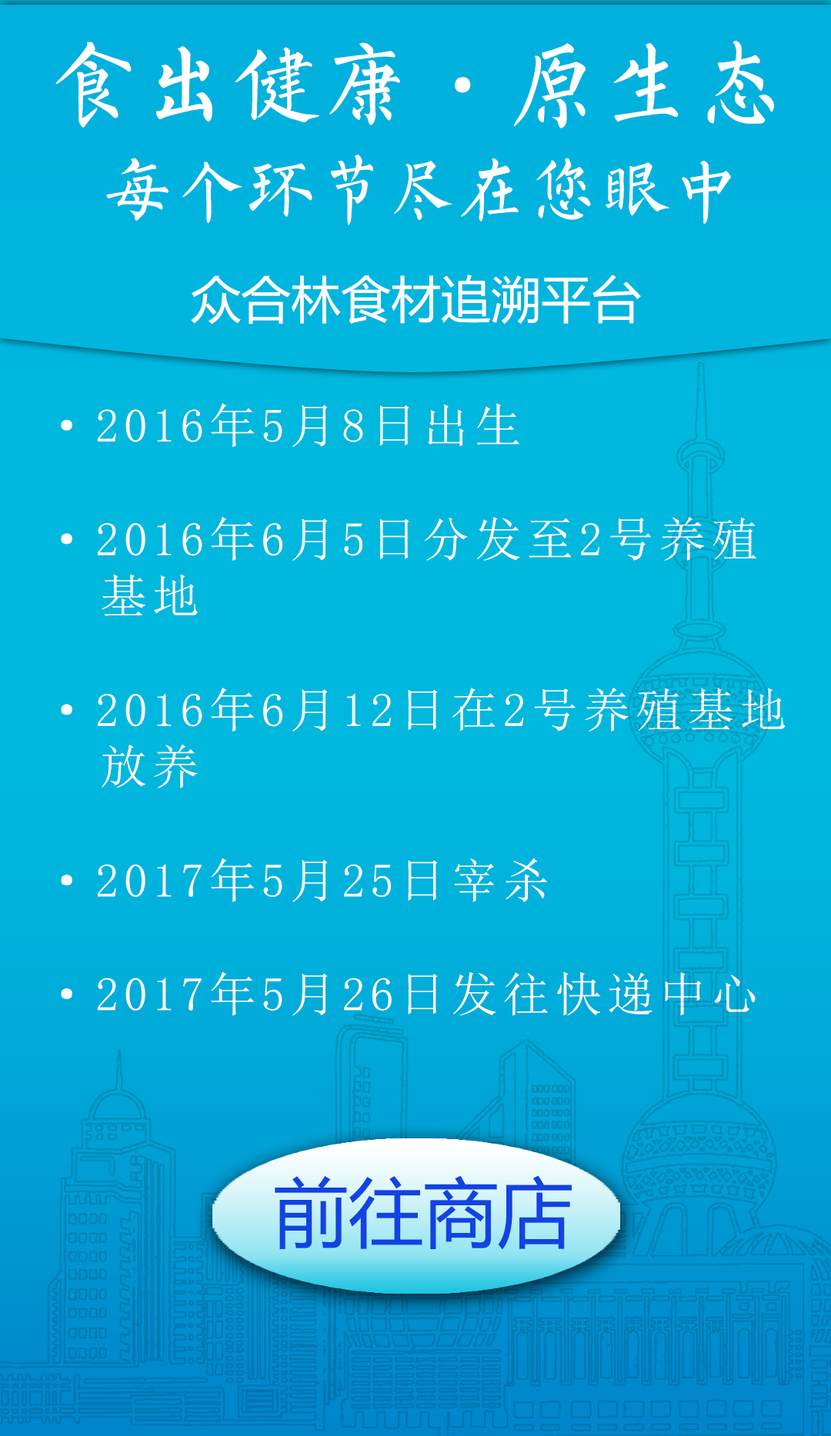
<style>
.page{position:relative;width:831px;height:1436px;background:#00b8de}
.page>*{position:absolute;margin:0}
.t1{font:70.8px/115.8px "LiuKai";color:#ffffff;font-variant:small-caps}
.t2{font:92.6px/115.8px "LiuKai";color:#ffffff;font-variant:small-caps}
.t3{font:50px "MicrosoftYaHei";color:#ffffff;font-variant:small-caps}
.t4{font:47.4px "SimSun";letter-spacing:0.1em;color:#ffffff}
.t5{font:75.3px "MicrosoftYaHei";color:#1243e3;font-variant:small-caps}
</style>
<div class="page">
<p class="t1" style="left:55px;top:41px;width:719px;height:184px;text-align:center"><span class="t2">食出健康·原生态<br></span>    每个环节尽在您眼中</p>
<p class="t3" style="left:191px;top:275px;width:450px;height:50px">众合林食材追溯平台</p>
<p class="t4" style="left:61px;top:403px;width:724px;height:613px">·2016年5月8日出生<br><br>·2016年6月5日分发至2号养殖<br>  基地<br><br>·2016年6月12日在2号养殖基地<br>  放养<br><br>·2017年5月25日宰杀<br><br>·2017年5月26日发往快递中心</p>
<p class="t5" style="left:275px;top:1175px;width:296px;height:75px">前往商店</p>
</div>
